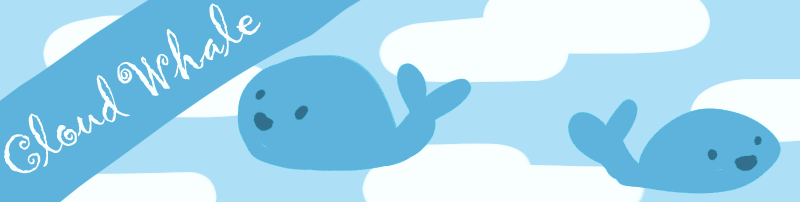
<style>
.page{position:relative;width:800px;height:202px;background:#5db3db}
.page>*{position:absolute;margin:0}
.t1{font:60px "Gigi-Regular";letter-spacing:-0.025em;color:#f9ffff}
</style>
<div class="page">
<p class="t1" style="left:4px;top:3px;width:257px;height:171px;rotate:-31deg">Cloud Whale</p>
</div>
